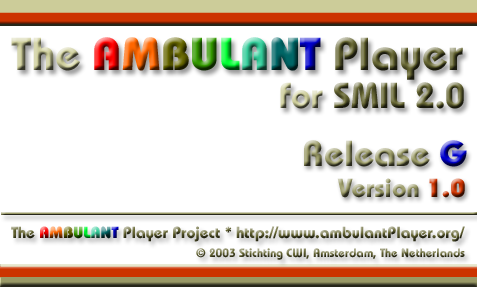
<style>
.page{position:relative;width:477px;height:287px;background:#ffffff}
.page>*{position:absolute;margin:0}
.t1{font:46px "Bauhaus-Bold"}
.t2{font:46px "Bauhaus-Heavy"}
.t3{font:36px "Bauhaus-Bold"}
.t4{font:36px "Bauhaus-Heavy"}
.t5{font:26px "Bauhaus-Bold"}
.t6{font:26px "Bauhaus-Heavy"}
.t7{font:16px "Bauhaus-Bold"}
.t8{font:16px "Bauhaus-Heavy"}
.t9{font:12px "Bauhaus-Bold"}
</style>
<div class="page">
<p class="t1" style="left:11px;top:37px;width:452px;height:43px">The <span class="t2">A</span><span class="t2">M</span><span class="t2">B</span><span class="t2">U</span><span class="t2">L</span><span class="t2">A</span><span class="t2">N</span><span class="t2">T </span>Player</p>
<p class="t3" style="left:280px;top:82px;width:184px;height:27px">for SMIL 2.0</p>
<p class="t3" style="left:304px;top:140px;width:163px;height:27px">Release <span class="t4">G</span></p>
<p class="t5" style="left:337px;top:178px;width:128px;height:20px">Version <span class="t6">1.0</span></p>
<p class="t7" style="left:11px;top:226px;width:454px;height:16px">The <span class="t8">A</span><span class="t8">M</span><span class="t8">B</span><span class="t8">U</span><span class="t8">L</span><span class="t8">A</span><span class="t8">N</span><span class="t8">T </span>Player Project * http://www.ambulantPlayer.org/</p>
<p class="t9" style="left:196px;top:248px;width:269px;height:12px">© 2003 Stichting CWI, Amsterdam, The Netherlands</p>
</div>
